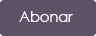
<style>
.page{position:relative;width:96px;height:36px;background:#5b5366}
.page>*{position:absolute;margin:0}
.t1{font:15.4px "CenturyGothic";color:#ffffff;scale:0.94 1}
</style>
<div class="page">
<p class="t1" style="left:19px;top:11px;width:54px;height:11px">Abonar</p>
</div>
